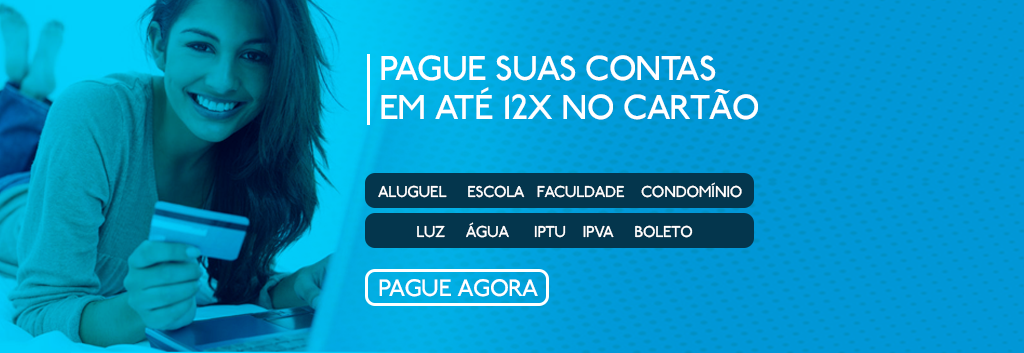
<style>
.page{position:relative;width:1024px;height:353px}
.page>*{position:absolute;margin:0}
.t1{font:36.5px "P22Underground";letter-spacing:-0.025em;color:#ffffff}
.t2{font:16.5px "P22Underground";letter-spacing:-0.025em;color:#ffffff}
.t3{font:25px "P22Underground";letter-spacing:-0.025em;color:#ffffff}
</style>
<div class="page">
<p class="t1" style="left:381px;top:55px;width:335px;height:26px">PAGUE SUAS CONTAS</p>
<p class="t1" style="left:381px;top:87px;width:377px;height:33px">EM ATÉ 12X NO CARTÃO</p>
<p class="t2" style="left:378px;top:182px;width:364px;height:16px">ALUGUEL     ESCOLA   FACULDADE    CONDOMÍNIO</p>
<p class="t2" style="left:417px;top:222px;width:276px;height:16px">LUZ     ÁGUA      IPTU    IPVA     BOLETO</p>
<p class="t3" style="left:379px;top:279px;width:159px;height:18px">PAGUE AGORA</p>
</div>
